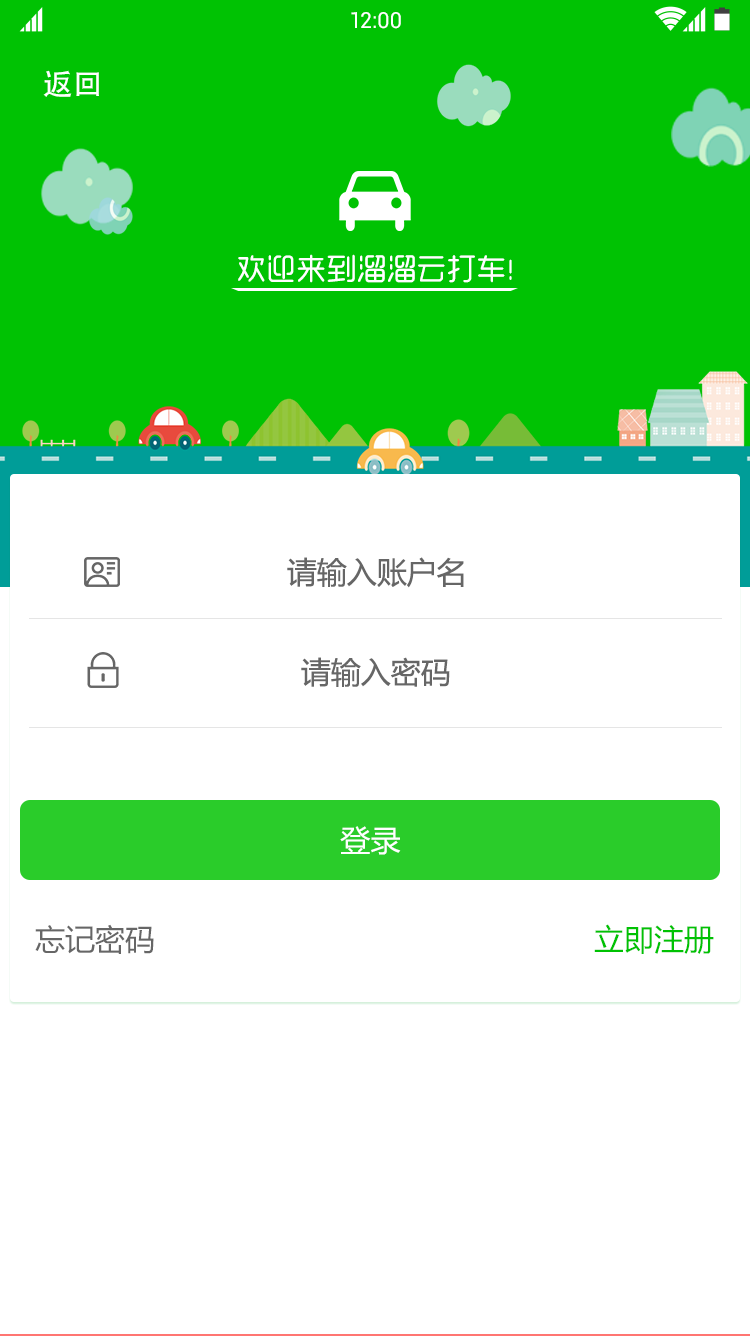
<style>
.page{position:relative;width:750px;height:1336px;background:#ffffff}
.page>*{position:absolute;margin:0}
.t1{font:22px "Roboto-Regular";color:#ffffff}
.t2{font:30px "AdobeHeitiStd-Regular";color:#ffffff}
.t3{font:30px "MFYueYuan_Noncommercial-Regular";color:#ffffff;text-transform:uppercase}
.t4{font:30px "MicrosoftYaHei";color:#666666;text-transform:uppercase}
.t5{font:30px "MicrosoftYaHei";color:#ffffff}
.t6{font:30px "MicrosoftYaHei";color:#666666}
.t7{font:30px "MicrosoftYaHei";color:#00c203}
</style>
<div class="page">
<p class="t1" style="left:351px;top:12px;width:50px;height:17px">12:00</p>
<p class="t2" style="left:43px;top:70px;width:56px;height:27px">返回</p>
<p class="t3" style="left:238px;top:254px;width:274px;height:29px">欢迎来到溜溜云打车！</p>
<p class="t4" style="left:287px;top:557px;width:177px;height:31px">请输入账户名</p>
<p class="t4" style="left:301px;top:657px;width:149px;height:30px">请输入密码</p>
<p class="t5" style="left:340px;top:826px;width:61px;height:29px">登录</p>
<p class="t6" style="left:35px;top:924px;width:119px;height:30px">忘记密码</p>
<p class="t7" style="left:594px;top:924px;width:120px;height:30px">立即注册</p>
</div>
